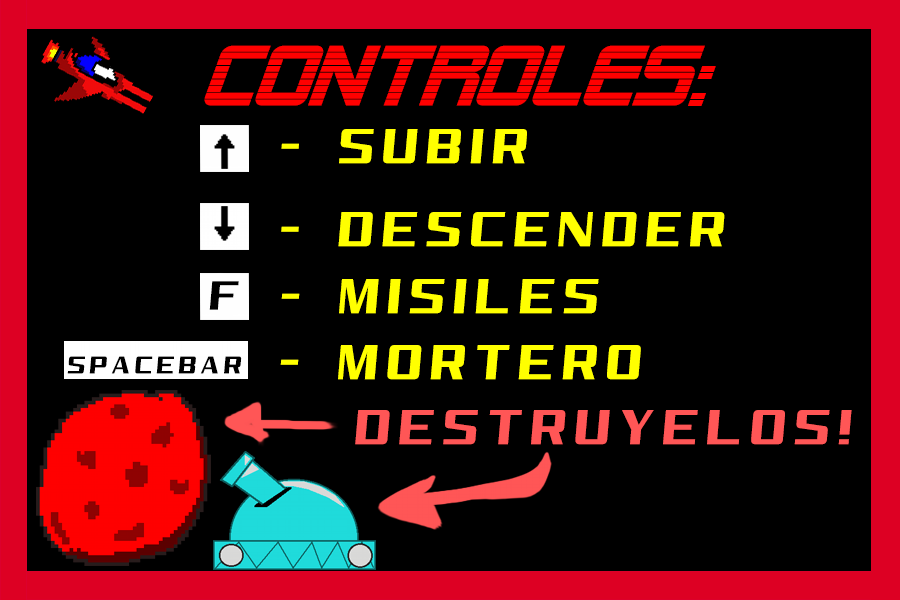
<style>
.page{position:relative;width:900px;height:600px;background:#000000}
.page>*{position:absolute;margin:0}
.t1{font:84px "AlienEncountersBoldItalic";color:#ff0000}
.t2{font:50px "RealityPursuitNC";color:#ffff00}
.t3{font:41.7px "RealityPursuitNC";color:#000000}
.t4{font:25px "RealityPursuitNC";color:#000000}
.t5{font:50px "RealityPursuitNC";color:#ff5656}
</style>
<div class="page">
<p class="t1" style="left:204px;top:45px;width:512px;height:61px">controles:</p>
<p class="t2" style="left:281px;top:129px;width:246px;height:35px">- subir</p>
<p class="t2" style="left:281px;top:212px;width:444px;height:35px">- descender</p>
<p class="t3" style="left:209px;top:281px;width:30px;height:29px">f</p>
<p class="t2" style="left:281px;top:279px;width:318px;height:35px">- misiles</p>
<p class="t2" style="left:280px;top:345px;width:361px;height:35px">- mortero</p>
<p class="t4" style="left:67px;top:356px;width:175px;height:18px">SPACEBAR</p>
<p class="t5" style="left:355px;top:410px;width:497px;height:35px">DESTRUYELOS!</p>
</div>
